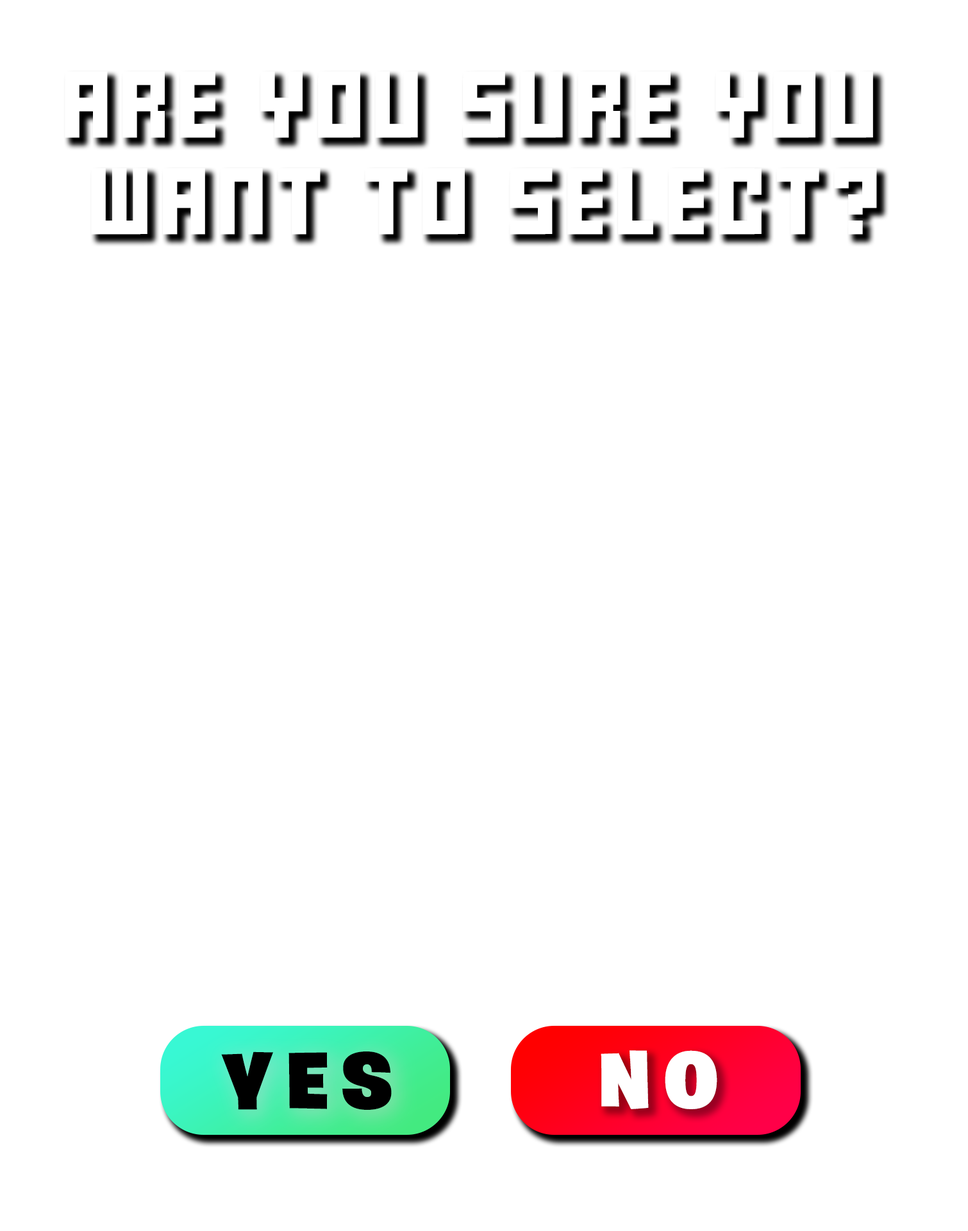
<style>
.page{position:relative;width:968px;height:1231px;background:#ffffff}
.page>*{position:absolute;margin:0}
.t1{font:52.5px/96.7px "FFFForward";letter-spacing:0.16em;color:#ffffff;text-transform:uppercase;scale:1.06 1}
.t2{font:79.9px "BurbankBigRegular-Black";letter-spacing:0.16em;color:#000000;text-transform:uppercase;scale:1.06 1}
.t3{font:79.9px "BurbankBigRegular-Black";letter-spacing:0.16em;color:#ffffff;text-transform:uppercase;scale:1.06 1}
</style>
<div class="page">
<p class="t1" style="left:65px;top:71px;width:812px;height:164px;text-align:center">are you sure you <br>want to select?</p>
<p class="t2" style="left:221px;top:1052px;width:171px;height:58px">yes</p>
<p class="t3" style="left:601px;top:1050px;width:117px;height:59px">NO</p>
</div>
